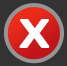
<style>
.page{position:relative;width:67px;height:66px;background:#333333}
.page>*{position:absolute;margin:0}
.t1{font:59.8px "Calibri";color:#ffffff;font-weight:bold;scale:1.19 1}
</style>
<div class="page">
<p class="t1" style="left:19px;top:19px;width:31px;height:29px">x</p>
</div>
